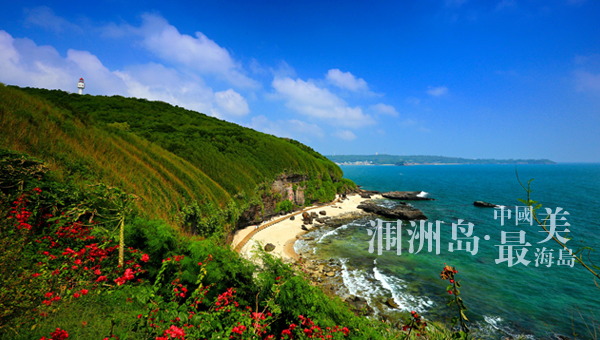
<style>
.page{position:relative;width:600px;height:340px}
.page>*{position:absolute;margin:0}
.t1{font:21.8px "FZDBSFW--GB1-0";color:#a2c5d3}
.t2{font:39.2px "FZDBSJW--GB1-0";color:#a2c3d0}
.t3{font:39.2px "FZDBSJW--GB1-0";color:#a8c5ca}
.t4{font:39.2px "FZDBSJW--GB1-0";color:#a2c4cd}
.t5{font:32.7px "FZXBSJW--GB1-0";color:#a4c5d1}
.t6{font:21.8px "FZDBSFW--GB1-0";color:#a2c3cd}
</style>
<div class="page">
<p class="t1" style="left:494px;top:205px;width:40px;height:21px">中国</p>
<p class="t2" style="left:536px;top:207px;width:35px;height:37px">美</p>
<p class="t3" style="left:366px;top:219px;width:114px;height:37px">涠洲岛</p>
<p class="t4" style="left:494px;top:230px;width:38px;height:37px">最</p>
<p class="t5" style="left:484px;top:235px;width:6px;height:6px">.</p>
<p class="t6" style="left:534px;top:247px;width:42px;height:21px">海岛</p>
</div>
